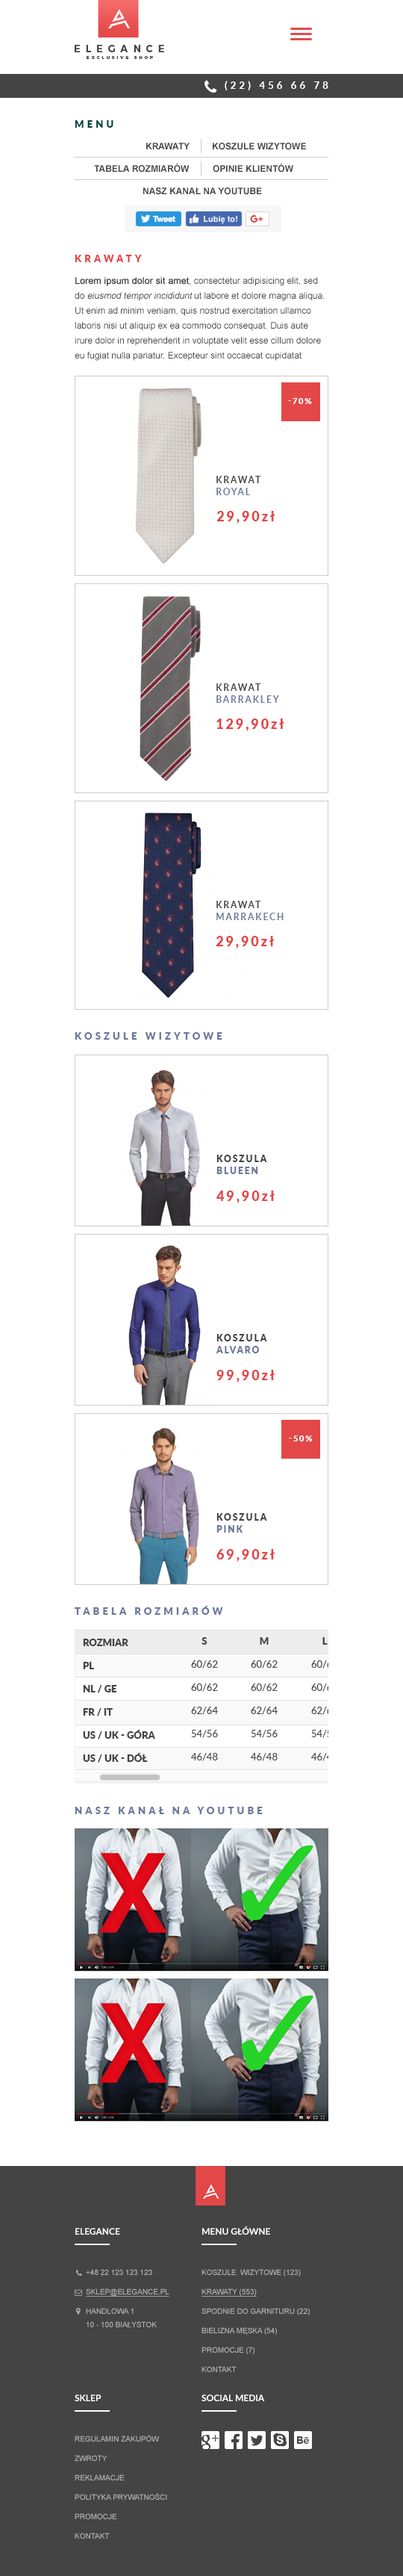
<style>
.page{position:relative;width:403px;height:2576px;background:#ffffff}
.page>*{position:absolute;margin:0}
.t1{font:25.2px "Moondance";letter-spacing:0.52em;color:#ffffff;text-transform:uppercase}
.t2{font:9.8px "Montserrat-Bold";letter-spacing:0.52em;color:#444444;text-transform:uppercase}
.t3{font:4.2px "Montserrat-Bold";letter-spacing:0.52em;color:#444444;text-transform:uppercase}
.t4{font:9.7px "Lato-Bold";letter-spacing:0.32em;color:#ffffff;text-transform:uppercase}
.t5{font:9.7px "Lato-Black";letter-spacing:0.32em;color:#044444;text-transform:uppercase}
.t6{font:9px "Arial-BoldMT";color:#444444;text-transform:uppercase}
.t7{font:9.7px "Lato-Black";letter-spacing:0.32em;color:#e34747;text-transform:uppercase}
.t8{font:9px/14.9px "ArialMT";color:#444444}
.t9{font:9px/14.9px "ArialMT";color:#444444;font-weight:bold}
.t10{font:9px/14.9px "ArialMT";color:#444444;font-style:italic}
.t11{font:8.2px "Lato-Black";letter-spacing:0.16em;color:#ffffff;text-transform:uppercase}
.t12{font:9px/12px "Lato-Bold";letter-spacing:0.16em;color:#444444;text-transform:uppercase}
.t13{font:9px/12px "Lato-Bold";letter-spacing:0.16em;color:#6c789b;text-transform:uppercase}
.t14{font:13.4px "Lato-Black";letter-spacing:0.16em;color:#e34747}
.t15{font:9.7px "Lato-Black";letter-spacing:0.32em;color:#6c789b;text-transform:uppercase}
.t16{font:9px/12px "Lato-Black";letter-spacing:0.16em;color:#444444;text-transform:uppercase}
.t17{font:9px/12px "Lato-Black";letter-spacing:0.16em;color:#6c789b;text-transform:uppercase}
.t18{font:9.7px/23.2px "Lato-Regular";color:#444444;text-transform:uppercase}
.t19{font:9.7px/23.2px "Lato-Black";color:#444444;text-transform:uppercase}
.t20{font:9px "Lato-Bold";color:#ffffff;text-transform:uppercase}
.t21{font:7.5px/19.4px "ArialMT";color:#b3b3b3;text-transform:uppercase}
.t22{font:7.5px/19.4px "ArialMT";color:#b3b3b3;text-transform:uppercase;text-decoration:underline}
.t23{font:7.5px/13.4px "ArialMT";color:#b3b3b3;text-transform:uppercase}
</style>
<div class="page">
<p class="t1" style="left:108px;top:9px;width:22px;height:19px">a</p>
<p class="t2" style="left:75px;top:45px;width:89px;height:7px">elegance</p>
<p class="t3" style="left:87px;top:56px;width:66px;height:3px">exclusive shop</p>
<p class="t4" style="left:225px;top:81px;width:104px;height:9px">(22) 456 66 78</p>
<p class="t5" style="left:75px;top:120px;width:39px;height:8px">menu</p>
<p class="t6" style="left:146px;top:143px;width:44px;height:6px">krawaty</p>
<p class="t6" style="left:213px;top:143px;width:93px;height:7px">koszule wizytowe</p>
<p class="t6" style="left:94px;top:163px;width:96px;height:10px">tabela rozmiarów</p>
<p class="t6" style="left:213px;top:163px;width:81px;height:10px">opinie klientów</p>
<p class="t6" style="left:143px;top:187px;width:119px;height:8px">nasz kanał na youtube</p>
<p class="t7" style="left:75px;top:255px;width:67px;height:7px">krawaty</p>
<p class="t8" style="left:75px;top:277px;width:250px;height:84px"><span class="t9">Lorem ipsum dolor sit amet</span>, consectetur adipisicing elit, sed do <span class="t10">eiusmod tempor incididunt </span>ut labore et dolore magna aliqua. Ut enim ad minim veniam, quis nostrud exercitation ullamco laboris nisi ut aliquip ex ea commodo consequat. Duis aute irure dolor in reprehenderit in voluptate velit esse cillum dolore eu fugiat nulla pariatur. Excepteur sint occaecat cupidatat</p>
<p class="t11" style="left:288px;top:398px;width:24px;height:6px">-70%</p>
<p class="t12" style="left:217px;top:476px;width:44px;height:19px">krawat <br><span class="t13">royal</span></p>
<p class="t14" style="left:217px;top:511px;width:58px;height:13px">29,90zł</p>
<p class="t13" style="left:217px;top:683px;width:62px;height:20px"><span class="t12">krawat <br></span>barrakley</p>
<p class="t14" style="left:217px;top:719px;width:68px;height:12px">129,90zł</p>
<p class="t13" style="left:217px;top:901px;width:67px;height:19px"><span class="t12">krawat <br></span>marrakech</p>
<p class="t14" style="left:216px;top:936px;width:58px;height:13px">29,90zł</p>
<p class="t15" style="left:75px;top:1032px;width:148px;height:8px">koszule wizytowe</p>
<p class="t16" style="left:217px;top:1155px;width:50px;height:19px">koszula<br><span class="t17">blueen</span></p>
<p class="t14" style="left:217px;top:1191px;width:58px;height:12px">49,90zł</p>
<p class="t16" style="left:216px;top:1334px;width:51px;height:19px">koszula<br><span class="t17">alvaro</span></p>
<p class="t14" style="left:217px;top:1370px;width:58px;height:12px">99,90zł</p>
<p class="t11" style="left:289px;top:1436px;width:24px;height:5px">-50%</p>
<p class="t16" style="left:217px;top:1513px;width:50px;height:20px">koszula<br><span class="t17">pink</span></p>
<p class="t14" style="left:217px;top:1549px;width:58px;height:13px">69,90zł</p>
<p class="t15" style="left:75px;top:1606px;width:148px;height:9px">tabela rozmiarów</p>
<p class="t18" style="left:191px;top:1637px;width:27px;height:124px;text-align:center"><span class="t19">S<br></span>60/62<br>60/62<br>62/64<br>54/56<br>46/48</p>
<p class="t18" style="left:251px;top:1637px;width:27px;height:124px;text-align:center"><span class="t19">M<br></span>60/62<br>60/62<br>62/64<br>54/56<br>46/48</p>
<p class="t18" style="left:311px;top:1637px;width:27px;height:124px;text-align:center"><span class="t19">l<br></span>60/62<br>60/62<br>62/64<br>54/56<br>46/48</p>
<p class="t19" style="left:83px;top:1639px;width:72px;height:124px">Rozmiar<br>PL<br>NL / GE<br>FR / IT<br>US / UK - góra<br>US / UK - Dół</p>
<p class="t15" style="left:75px;top:1807px;width:188px;height:7px">Nasz kanał na youtube</p>
<p class="t20" style="left:202px;top:2226px;width:68px;height:9px">menu główne</p>
<p class="t20" style="left:75px;top:2228px;width:45px;height:7px">Elegance</p>
<p class="t21" style="left:86px;top:2269px;width:84px;height:58px">+48 22 123 123 123<br><span class="t22">sklep@elegance.pl<br></span>handlowa 1<br><span class="t23">10 - 100 białystok</span></p>
<p class="t21" style="left:202px;top:2269px;width:108px;height:103px">koszule  wizytowe (123)<br><span class="t22">krawaty (553)<br></span>spodnie do garnituru (22)<br>bielizna męska (54)<br>promocje (7)<br>kontakt</p>
<p class="t20" style="left:75px;top:2395px;width:27px;height:6px">sklep</p>
<p class="t20" style="left:202px;top:2395px;width:63px;height:6px">social media</p>
<p class="t21" style="left:75px;top:2435px;width:92px;height:104px">regulamin zakupów<br>zwroty<br>reklamacje<br>polityka prywatności<br>promocje<br>kontakt</p>
</div>
